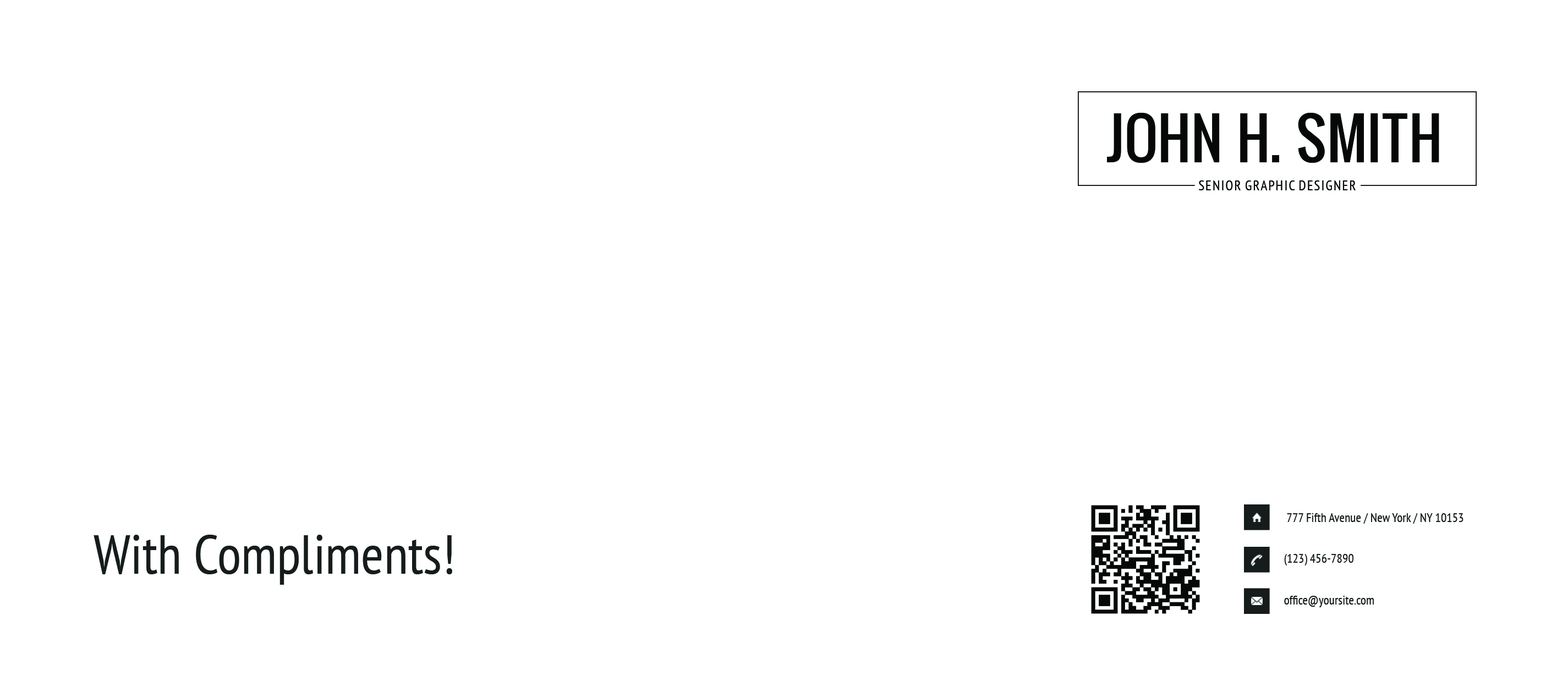
<style>
.page{position:relative;width:1568px;height:681px;background:#ffffff}
.page>*{position:absolute;margin:0}
.t1{font:55.9px "Oswald";color:#161b1b;text-transform:uppercase}
.t2{font:14px "PTSans-Narrow";color:#060808;text-transform:uppercase}
.t3{font:12.8px "PTSans-Narrow";color:#161b1b}
.t4{font:55px "PTSans-Narrow";color:#161b1b}
</style>
<div class="page">
<p class="t1" style="left:1107px;top:113px;width:332px;height:50px">john H. smith</p>
<p class="t2" style="left:1199px;top:180px;width:157px;height:10px">senior graphic designer</p>
<p class="t3" style="left:1287px;top:513px;width:176px;height:11px">777 Fifth Avenue / New York / NY 10153</p>
<p class="t4" style="left:94px;top:535px;width:358px;height:50px">With Compliments!</p>
<p class="t3" style="left:1284px;top:554px;width:70px;height:12px">(123) 456-7890</p>
<p class="t3" style="left:1284px;top:596px;width:90px;height:11px">office@yoursite.com</p>
</div>
